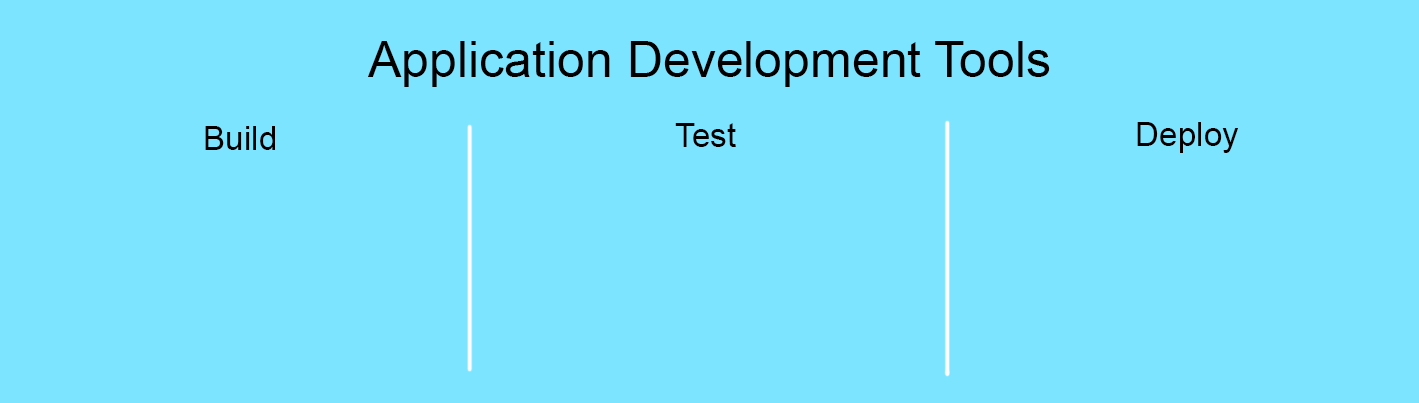
<style>
.page{position:relative;width:1419px;height:403px;background:#7ce4ff}
.page>*{position:absolute;margin:0}
.t1{font:12px "ArialMT";color:#000000}
.t2{font:33.3px "ArialMT";color:#000000}
</style>
<div class="page">
<p class="t1" style="left:368px;top:41px;width:682px;height:46px;text-align:center">Application Development Tools</p>
<p class="t2" style="left:205px;top:126px;width:70px;height:24px">Build</p>
<p class="t2" style="left:675px;top:123px;width:61px;height:24px">Test</p>
<p class="t2" style="left:1137px;top:122px;width:101px;height:31px">Deploy</p>
</div>
